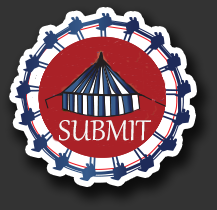
<style>
.page{position:relative;width:217px;height:210px;background:#333333}
.page>*{position:absolute;margin:0}
.t1{font:35px "Gabriola";color:#f6f7f6}
</style>
<div class="page">
<p class="t1" style="left:59px;top:120px;width:92px;height:21px">SUBMIT</p>
</div>
